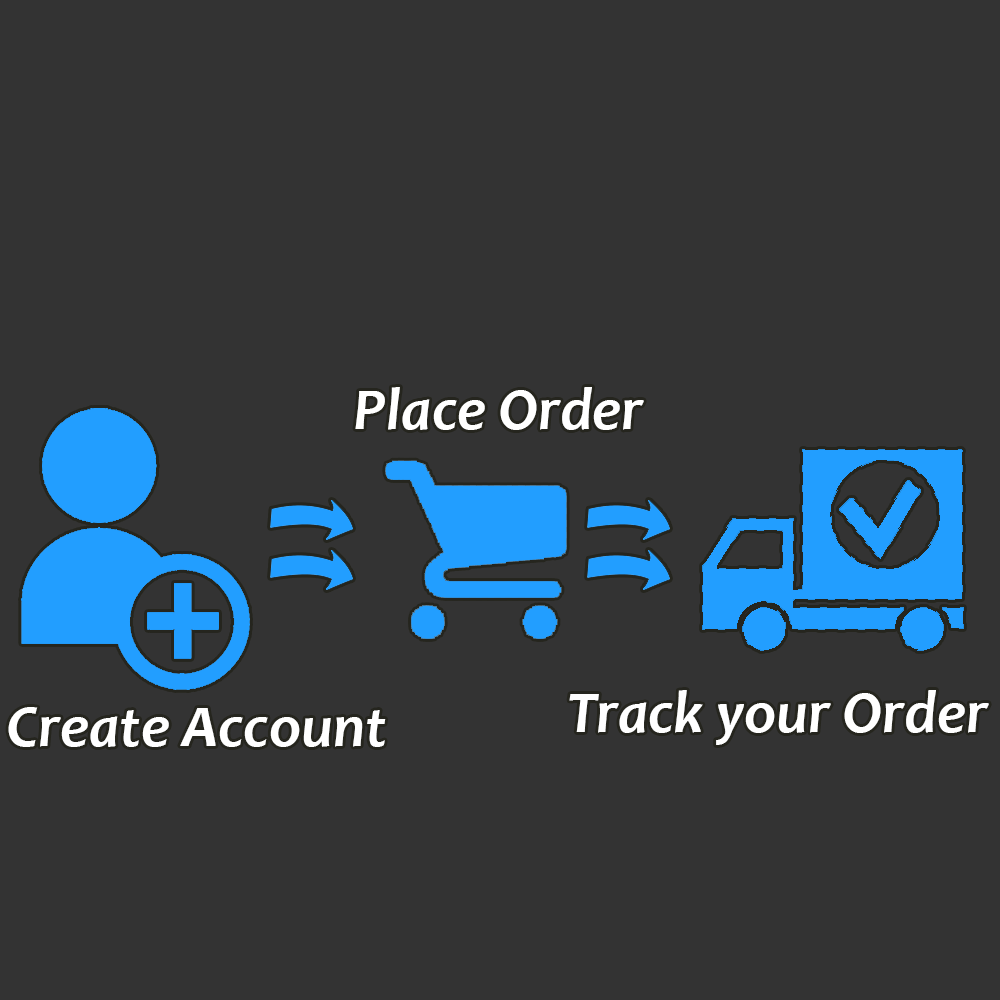
<style>
.page{position:relative;width:1000px;height:1000px;background:#333333}
.page>*{position:absolute;margin:0}
.t1{font:60px "Candara-BoldItalic";color:#ffffff}
</style>
<div class="page">
<p class="t1" style="left:355px;top:387px;width:289px;height:43px">Place Order</p>
<p class="t1" style="left:569px;top:690px;width:420px;height:55px">Track your Order</p>
<p class="t1" style="left:8px;top:707px;width:378px;height:40px">Create Account</p>
</div>
